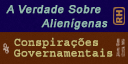
<style>
.page{position:relative;width:128px;height:64px}
.page>*{position:absolute;margin:0}
.t1{font:11px/14px "ArialMT";letter-spacing:0.05em;color:#93bbad;font-weight:bold;font-style:italic}
.t2{font:11px/14px "ArialMT";letter-spacing:0.05em;color:#93bbad;text-transform:uppercase;font-weight:bold;font-style:italic}
.t3{font:11.5px/10.7px "CourierStd";letter-spacing:0.03em;color:#c2b875;font-weight:bold;scale:0.94 1}
.t4{font:11.5px/10.7px "CourierStd";letter-spacing:0.03em;color:#c2b875;text-transform:uppercase;font-weight:bold;scale:0.94 1}
</style>
<div class="page">
<p class="t1" style="left:6px;top:5px;width:102px;height:25px;text-align:center"><span class="t2">a v</span>erdade<span class="t2"> s</span>obre<br><span class="t2">           a</span>lienígenas</p>
<p class="t3" style="left:14px;top:37px;width:99px;height:20px"><span class="t4">c</span>onspirações<br><span class="t4">g</span>overnamentais</p>
</div>
